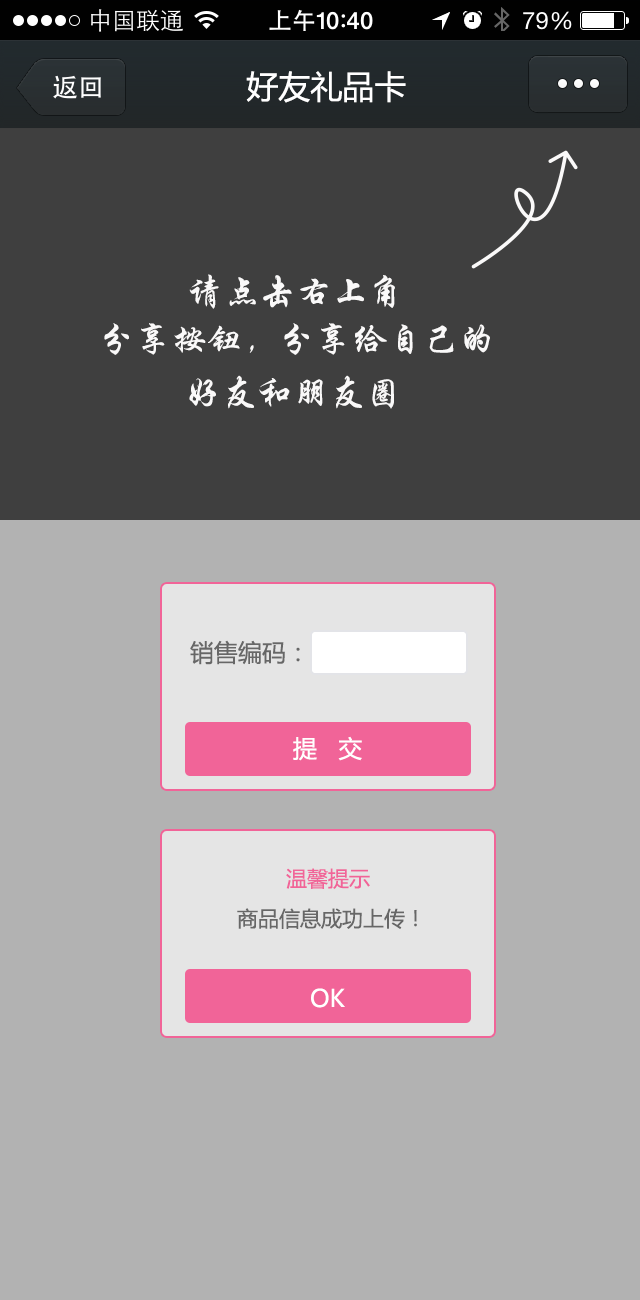
<style>
.page{position:relative;width:640px;height:1300px;background:#b2b2b2}
.page>*{position:absolute;margin:0}
.t1{font:32px "MicrosoftYaHei";color:#ffffff}
.t2{font:36px "STXingkai";color:#faf9f9}
.t3{font:24px "MicrosoftYaHei";color:#676767}
.t4{font:24px "MicrosoftYaHei";color:#ffffff}
.t5{font:21px "MicrosoftYaHei";color:#f16498}
.t6{font:21px "MicrosoftYaHei";color:#676767}
</style>
<div class="page">
<p class="t1" style="left:246px;top:71px;width:160px;height:32px">好友礼品卡</p>
<p class="t2" style="left:189px;top:274px;width:206px;height:35px">请点击右上角</p>
<p class="t2" style="left:104px;top:323px;width:386px;height:32px">分享按钮，分享给自己的</p>
<p class="t2" style="left:189px;top:375px;width:205px;height:34px">好友和朋友圈</p>
<p class="t3" style="left:190px;top:640px;width:110px;height:25px">销售编码：</p>
<p class="t4" style="left:293px;top:736px;width:69px;height:25px">提   交</p>
<p class="t5" style="left:286px;top:868px;width:84px;height:21px">温馨提示</p>
<p class="t6" style="left:237px;top:908px;width:180px;height:21px">商品信息成功上传！</p>
<p class="t4" style="left:311px;top:988px;width:34px;height:20px">OK</p>
</div>
